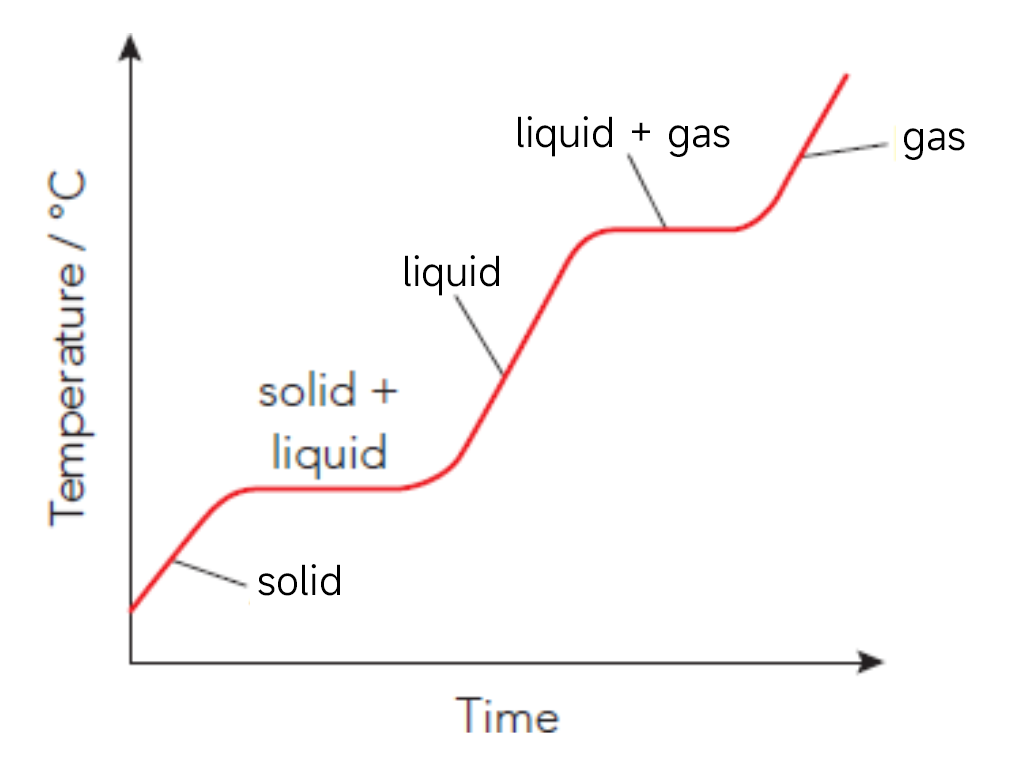
<style>
.page{position:relative;width:1013px;height:761px;background:#ffffff}
.page>*{position:absolute;margin:0}
.t1{font:40px "MiSans-Normal";color:#000000}
</style>
<div class="page">
<p class="t1" style="left:518px;top:116px;width:212px;height:41px">liquid + gas</p>
<p class="t1" style="left:904px;top:128px;width:61px;height:32px">gas</p>
<p class="t1" style="left:405px;top:255px;width:94px;height:41px">liquid</p>
<p class="t1" style="left:258px;top:564px;width:82px;height:32px">solid</p>
</div>
